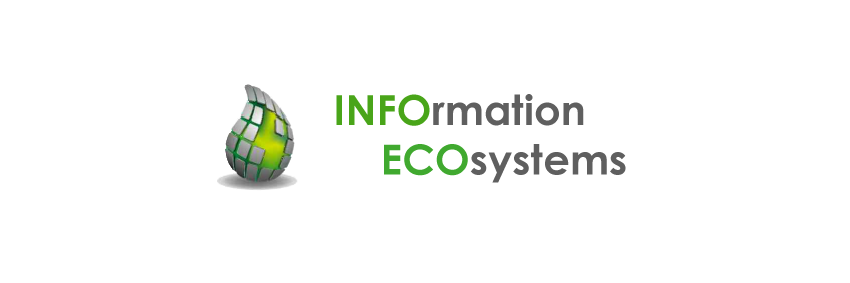
<style>
.page{position:relative;width:850px;height:283px;background:#ffffff}
.page>*{position:absolute;margin:0}
.t1{font:41.4px "CenturyGothic-Bold";color:#5f5f5f}
.t2{font:41.4px "CenturyGothic-Bold";color:#49a519}
.t3{font:41.4px "CenturyGothic-Bold";color:#40a92f}
</style>
<div class="page">
<p class="t1" style="left:336px;top:94px;width:290px;height:89px"><span class="t2">INFO</span>rmation<br>    <span class="t3">ECO</span>systems</p>
</div>
